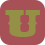
<style>
.page{position:relative;width:45px;height:45px;background:#a75157}
.page>*{position:absolute;margin:0}
.t1{font:50px "Saddlebag-Black";color:#949146}
</style>
<div class="page">
<p class="t1" style="left:5px;top:10px;width:35px;height:27px">U</p>
</div>
